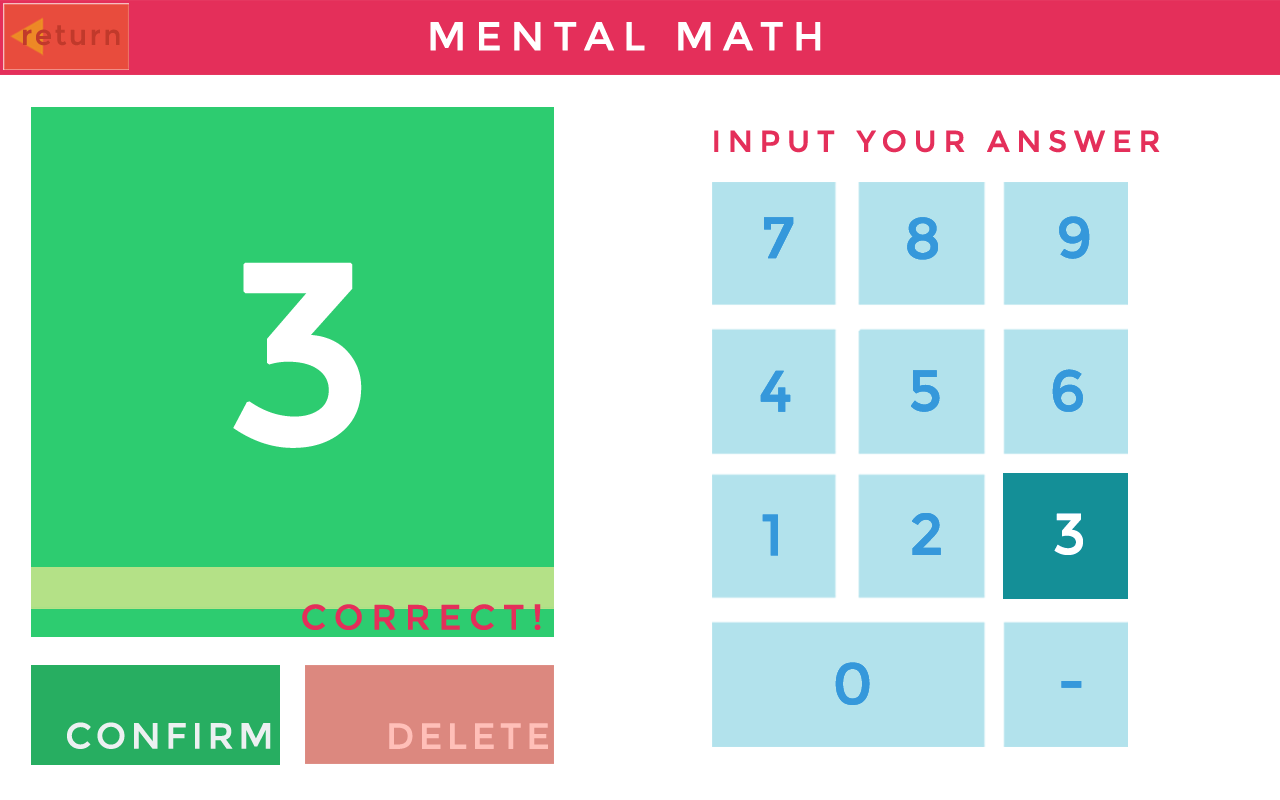
<style>
.page{position:relative;width:1280px;height:800px;background:#ffffff}
.page>*{position:absolute;margin:0}
.t1{font:30px "Montserrat-Regular";letter-spacing:0.2em;color:#e42f5a;text-transform:uppercase;font-weight:bold}
.t2{font:57.6px "Montserrat-Regular";letter-spacing:0.2em;color:#3598db;text-transform:uppercase;font-weight:bold}
.t3{font:256.5px "Montserrat-Regular";letter-spacing:0.2em;color:#ffffff;text-transform:uppercase;font-weight:bold}
.t4{font:57.6px "Montserrat-Regular";letter-spacing:0.2em;color:#ffffff;text-transform:uppercase;font-weight:bold}
.t5{font:35.1px "Montserrat-Regular";letter-spacing:0.2em;color:#e42f5a;text-transform:uppercase;font-weight:bold}
.t6{font:36px "Montserrat-Regular";letter-spacing:0.1em;color:#ecf0f1;text-transform:uppercase;font-weight:bold}
.t7{font:36px "Montserrat-Regular";letter-spacing:0.1em;color:#ffbfb8;text-transform:uppercase;font-weight:bold}
</style>
<div class="page">
<p class="t1" style="left:714px;top:130px;width:446px;height:23px">Input your Answer</p>
<p class="t2" style="left:764px;top:217px;width:30px;height:42px">7</p>
<p class="t2" style="left:907px;top:217px;width:31px;height:43px">8</p>
<p class="t2" style="left:1059px;top:216px;width:31px;height:43px">9</p>
<p class="t3" style="left:233px;top:262px;width:129px;height:186px">3</p>
<p class="t2" style="left:760px;top:370px;width:31px;height:42px">4</p>
<p class="t2" style="left:911px;top:370px;width:29px;height:42px">5</p>
<p class="t2" style="left:1052px;top:369px;width:31px;height:43px">6</p>
<p class="t2" style="left:762px;top:514px;width:16px;height:42px">1</p>
<p class="t2" style="left:912px;top:513px;width:29px;height:42px">2</p>
<p class="t4" style="left:1054px;top:513px;width:29px;height:42px">3</p>
<p class="t5" style="left:302px;top:604px;width:239px;height:26px">Correct!</p>
<p class="t2" style="left:835px;top:662px;width:35px;height:43px">0</p>
<p class="t2" style="left:1061px;top:681px;width:21px;height:7px">-</p>
<p class="t6" style="left:67px;top:722px;width:204px;height:27px">Confirm</p>
<p class="t7" style="left:389px;top:723px;width:159px;height:26px">Delete</p>
</div>
